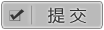
<style>
.page{position:relative;width:104px;height:30px;background:#bababa}
.page>*{position:absolute;margin:0}
.t1{font:16.4px "MicrosoftYaHei";letter-spacing:0.3em;color:#323232}
</style>
<div class="page">
<p class="t1" style="left:48px;top:7px;width:39px;height:17px">提交</p>
</div>
